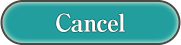
<style>
.page{position:relative;width:181px;height:45px;background:#239e9f}
.page>*{position:absolute;margin:0}
.t1{font:24px "RyuminPro-ExBold";letter-spacing:-0.04em;color:#fffffa}
</style>
<div class="page">
<p class="t1" style="left:56px;top:13px;width:69px;height:19px">Cancel</p>
</div>
